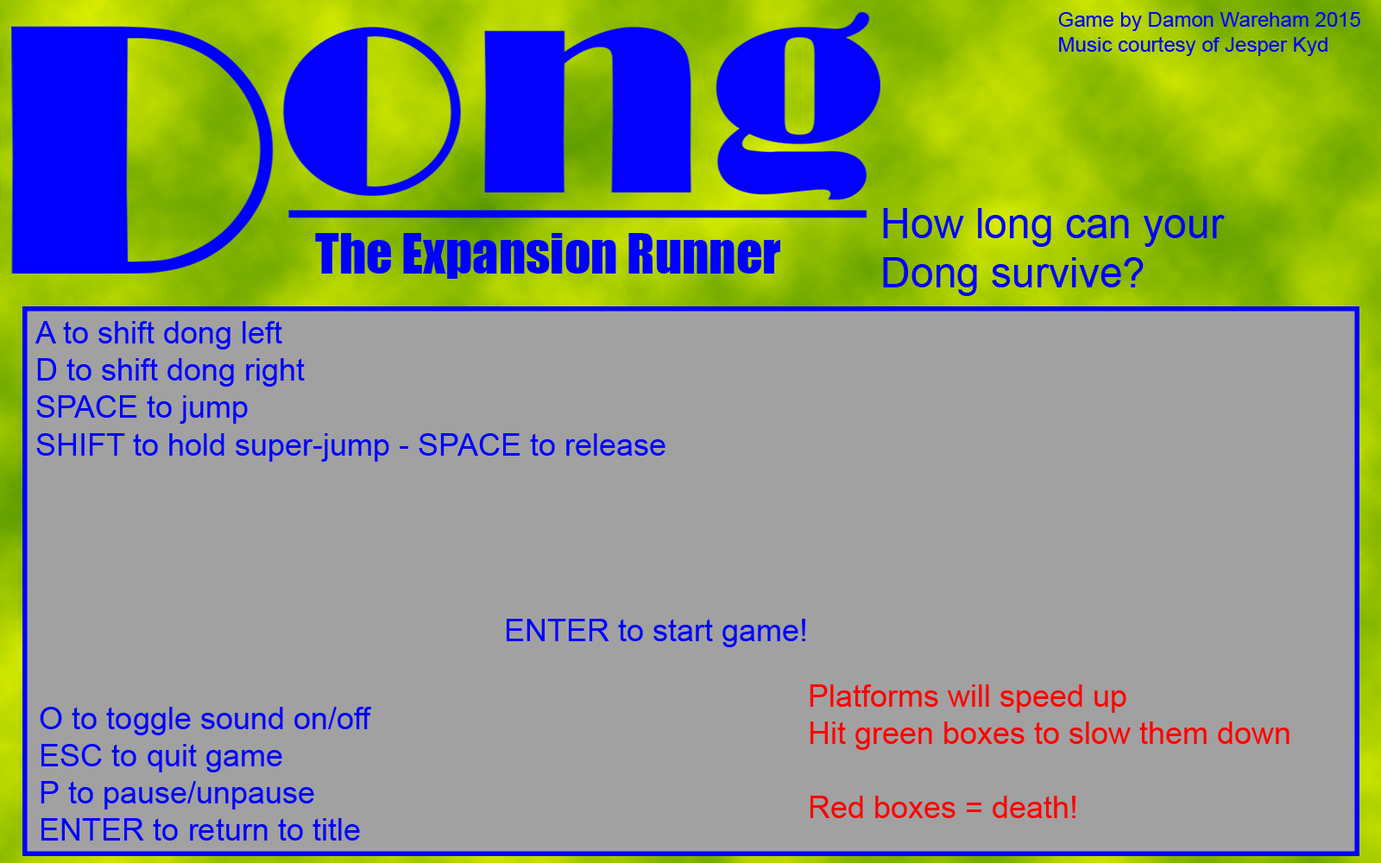
<style>
.page{position:relative;width:1381px;height:863px;background:#a1a1a1}
.page>*{position:absolute;margin:0}
.t1{font:20.7px "ArialMT";color:#0000ff}
.t2{font:41.4px "ArialMT";color:#0000ff}
.t3{font:51.8px "Impact";color:#0000ff}
.t4{font:31.1px "ArialMT";color:#0000ff}
.t5{font:31.1px "ArialMT";color:#ff0000}
</style>
<div class="page">
<p class="t1" style="left:1058px;top:12px;width:303px;height:44px">Game by Damon Wareham 2015<br>Music courtesy of Jesper Kyd</p>
<p class="t2" style="left:883px;top:208px;width:342px;height:88px">How long can your <br>Dong survive?</p>
<p class="t3" style="left:315px;top:233px;width:465px;height:46px">The Expansion Runner</p>
<p class="t4" style="left:35px;top:321px;width:631px;height:141px">A to shift dong left<br>D to shift dong right<br>SPACE to jump<br>SHIFT to hold super-jump - SPACE to release</p>
<p class="t4" style="left:507px;top:619px;width:298px;height:28px">ENTER to start game!</p>
<p class="t5" style="left:810px;top:685px;width:480px;height:133px">Platforms will speed up<br>Hit green boxes to slow them down<br><br>Red boxes = death!</p>
<p class="t4" style="left:40px;top:707px;width:332px;height:134px">O to toggle sound on/off<br>ESC to quit game<br>P to pause/unpause<br>ENTER to return to title</p>
</div>
